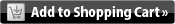
<style>
.page{position:relative;width:175px;height:24px;background:#4d4d4d}
.page>*{position:absolute;margin:0}
.t1{font:13px "KozGoPro-Heavy";letter-spacing:-0.01em;color:#fefefe}
</style>
<div class="page">
<p class="t1" style="left:31px;top:6px;width:137px;height:14px">Add to Shopping Cart »</p>
</div>
